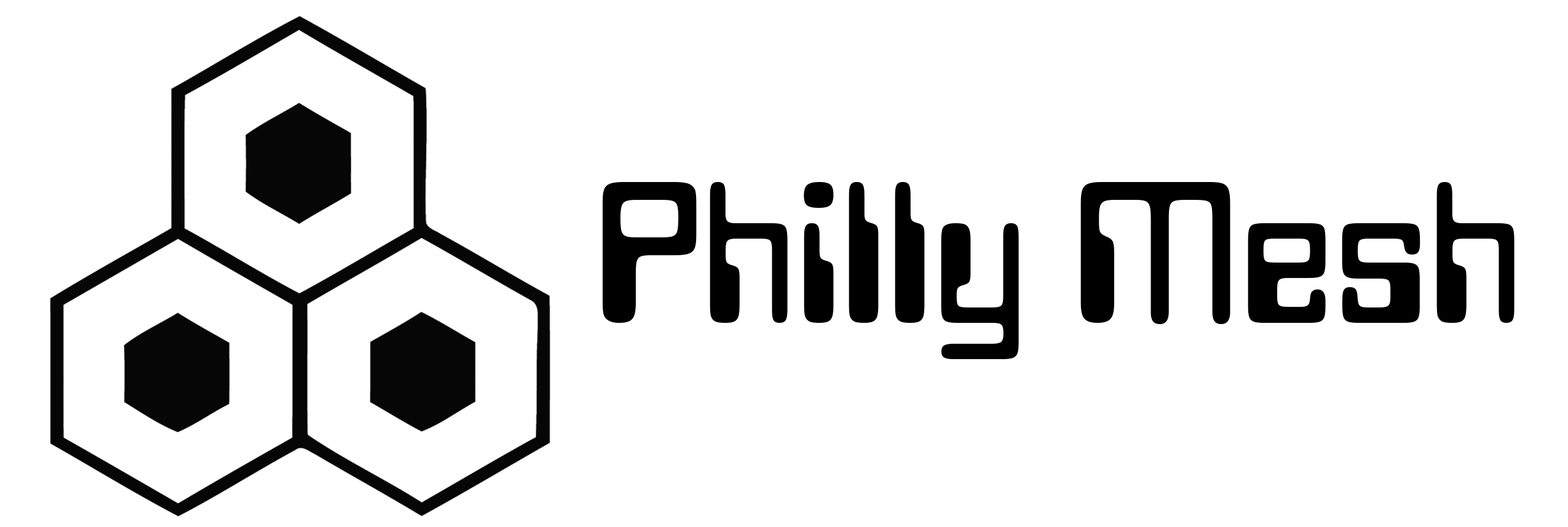
<style>
.page{position:relative;width:1568px;height:527px;background:#ffffff}
.page>*{position:absolute;margin:0}
.t1{font:210.8px "DataSeventyPlain";color:#000000}
</style>
<div class="page">
<p class="t1" style="left:603px;top:182px;width:912px;height:177px">Philly Mesh</p>
</div>
